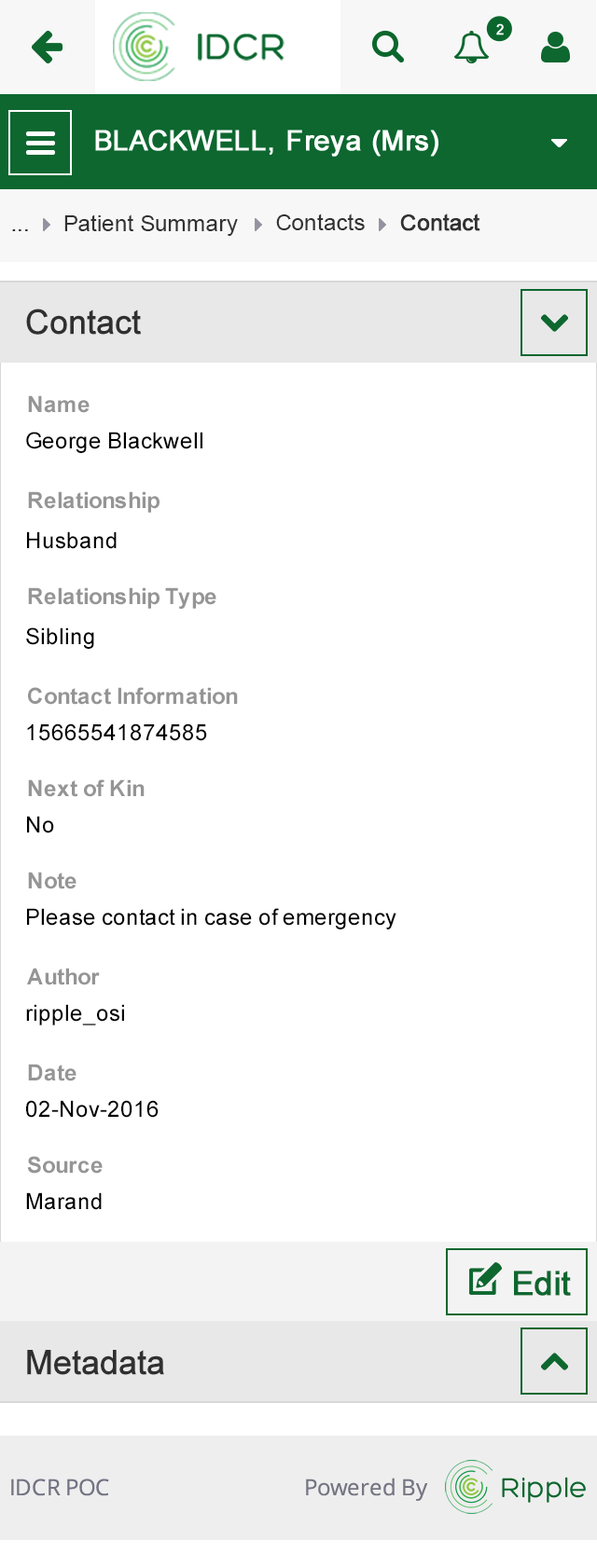
<style>
.page{position:relative;width:597px;height:1568px;background:#ffffff}
.page>*{position:absolute;margin:0}
.t1{font:22.4px "ArialMT";color:#313131}
.t2{font:22.4px "ArialMT";color:#313131;font-weight:bold}
.t3{font:33.6px "ArialMT";color:#303030;font-weight:bold}
.t4{font:22.4px "Arial-BoldMT";color:#959595}
.t5{font:22.4px "ArialMT";color:#000000}
.t6{font:33.6px "ArialMT";color:#0d672f;font-weight:bold}
</style>
<div class="page">
<p class="t1" style="left:64px;top:214px;width:174px;height:22px">Patient Summary</p>
<p class="t1" style="left:276px;top:213px;width:88px;height:17px">Contacts</p>
<p class="t2" style="left:400px;top:213px;width:80px;height:18px">Contact</p>
<p class="t1" style="left:12px;top:229px;width:16px;height:2px">...</p>
<p class="t3" style="left:26px;top:309px;width:115px;height:26px">Contact</p>
<p class="t4" style="left:28px;top:395px;width:61px;height:18px">Name</p>
<p class="t5" style="left:26px;top:432px;width:176px;height:21px">George Blackwell</p>
<p class="t4" style="left:28px;top:491px;width:131px;height:22px">Relationship</p>
<p class="t5" style="left:27px;top:531px;width:90px;height:18px">Husband</p>
<p class="t4" style="left:28px;top:587px;width:188px;height:22px">Relationship Type</p>
<p class="t5" style="left:26px;top:627px;width:68px;height:22px">Sibling</p>
<p class="t4" style="left:28px;top:687px;width:210px;height:18px">Contact Information</p>
<p class="t5" style="left:27px;top:723px;width:180px;height:18px">15665541874585</p>
<p class="t4" style="left:28px;top:779px;width:116px;height:18px">Next of Kin</p>
<p class="t5" style="left:27px;top:816px;width:27px;height:17px">No</p>
<p class="t4" style="left:28px;top:872px;width:48px;height:17px">Note</p>
<p class="t5" style="left:27px;top:908px;width:369px;height:21px">Please contact in case of emergency</p>
<p class="t4" style="left:27px;top:968px;width:73px;height:17px">Author</p>
<p class="t5" style="left:26px;top:1004px;width:98px;height:21px">ripple_osi</p>
<p class="t4" style="left:28px;top:1064px;width:48px;height:17px">Date</p>
<p class="t5" style="left:26px;top:1100px;width:132px;height:18px">02-Nov-2016</p>
<p class="t4" style="left:27px;top:1156px;width:76px;height:18px">Source</p>
<p class="t5" style="left:26px;top:1192px;width:76px;height:18px">Marand</p>
<p class="t6" style="left:514px;top:1271px;width:57px;height:25px">Edit</p>
<p class="t3" style="left:27px;top:1350px;width:137px;height:25px">Metadata</p>
</div>
